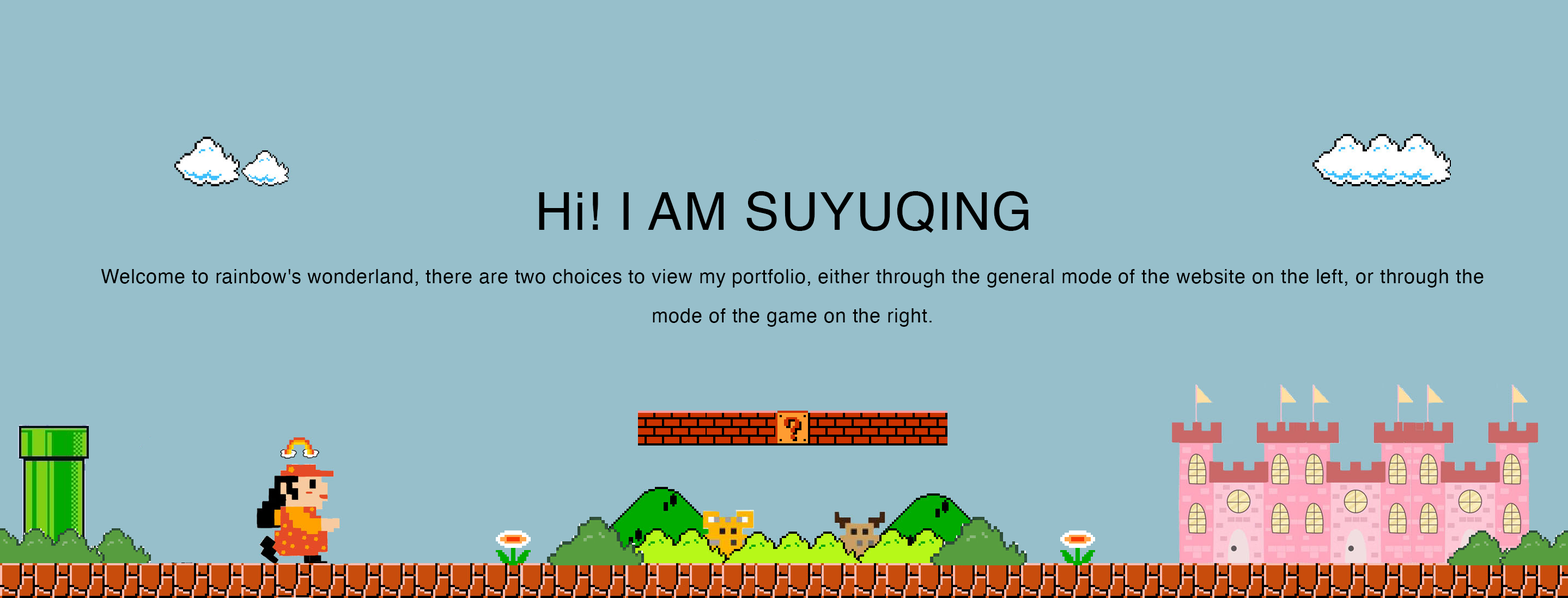
<style>
.page{position:relative;width:1568px;height:598px;background:#97bfcb}
.page>*{position:absolute;margin:0}
.t1{font:52.3px "Helvetica";letter-spacing:0.025em;color:#000000}
.t2{font:19.6px/39.2px "Helvetica";letter-spacing:0.025em;color:#000000}
</style>
<div class="page">
<p class="t1" style="left:539px;top:191px;width:490px;height:42px">Hi! I AM SUYUQING</p>
<p class="t2" style="left:101px;top:269px;width:1383px;height:58px;text-align:center">Welcome to rainbow's wonderland, there are two choices to view my portfolio, either through the general mode of the website on the left, or through the mode of the game on the right.</p>
</div>
